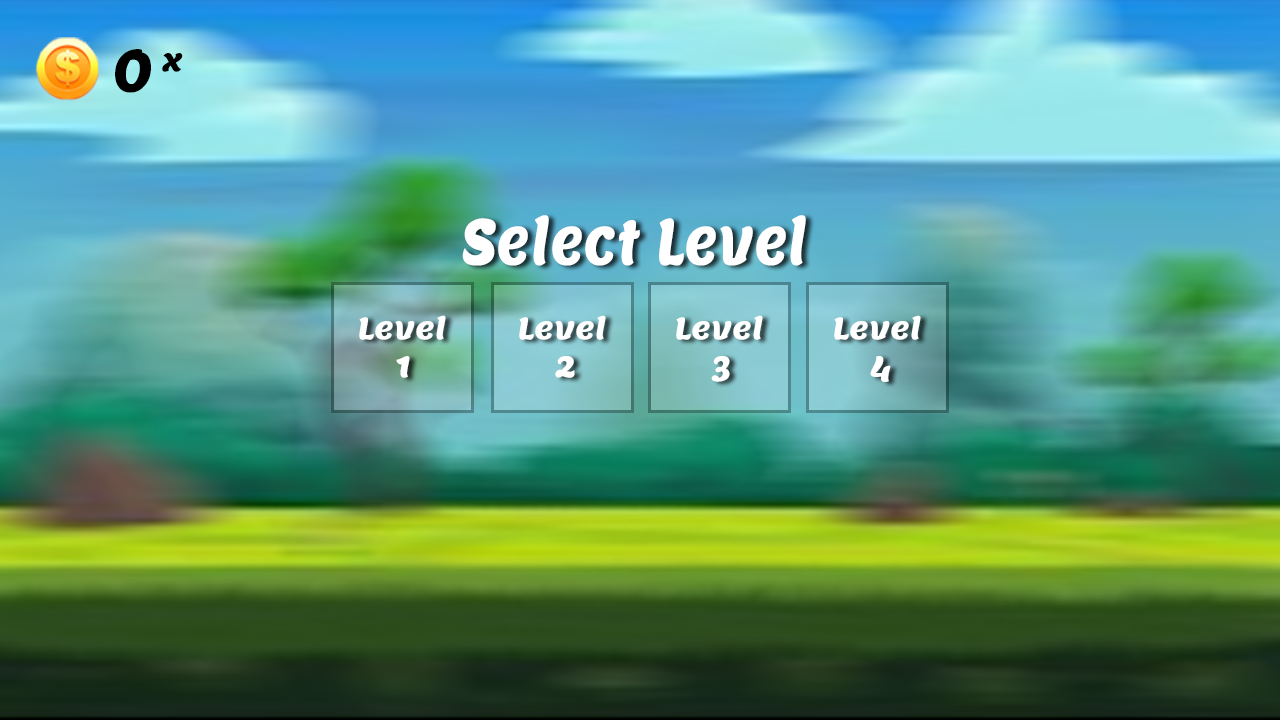
<style>
.page{position:relative;width:1280px;height:720px}
.page>*{position:absolute;margin:0}
.t1{font:59.9px "Lemon-Regular";color:#000000;scale:0.93 1}
.t2{font:30px "Lemon-Regular";color:#000000}
.t3{font:63.1px "Lemon-Regular";color:#ffffff;scale:0.81 1}
.t4{font:30px "Lemon-Regular";color:#ffffff}
</style>
<div class="page">
<p class="t1" style="left:115px;top:49px;width:36px;height:44px;rotate:-3deg">0</p>
<p class="t2" style="left:162px;top:53px;width:21px;height:19px">x</p>
<p class="t3" style="left:462px;top:215px;width:344px;height:51px">Select Level</p>
<p class="t4" style="left:359px;top:315px;width:87px;height:25px">Level</p>
<p class="t4" style="left:519px;top:315px;width:87px;height:25px">Level</p>
<p class="t4" style="left:676px;top:315px;width:87px;height:25px">Level</p>
<p class="t4" style="left:834px;top:315px;width:87px;height:25px">Level</p>
<p class="t4" style="left:396px;top:356px;width:14px;height:22px">1</p>
<p class="t4" style="left:555px;top:356px;width:20px;height:22px">2</p>
<p class="t4" style="left:711px;top:356px;width:19px;height:26px">3</p>
<p class="t4" style="left:870px;top:356px;width:21px;height:26px">4</p>
</div>
